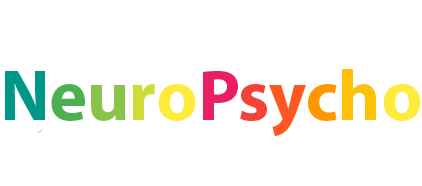
<style>
.page{position:relative;width:422px;height:186px;background:#ffffff}
.page>*{position:absolute;margin:0}
.t1{font:72px "MyriadPro-Bold";color:#009688}
.t2{font:72px "MyriadPro-Bold";color:#4caf50}
.t3{font:72px "MyriadPro-Bold";color:#8bc34a}
.t4{font:72px "MyriadPro-Bold";color:#cddc39}
.t5{font:72px "MyriadPro-Bold";color:#ffeb3b}
.t6{font:72px "MyriadPro-Bold";color:#e91e63}
.t7{font:72px "MyriadPro-Bold";color:#f44336}
.t8{font:72px "MyriadPro-Bold";color:#ff5722}
.t9{font:72px "MyriadPro-Bold";color:#ff9800}
.t10{font:72px "MyriadPro-Bold";color:#ffc107}
</style>
<div class="page">
<p class="t1" style="left:5px;top:69px;width:416px;height:68px">N<span class="t2">e</span><span class="t3">u</span><span class="t4">r</span><span class="t5">o</span><span class="t6">P</span><span class="t7">s</span><span class="t8">y</span><span class="t9">c</span><span class="t10">h</span><span class="t5">o</span></p>
</div>
